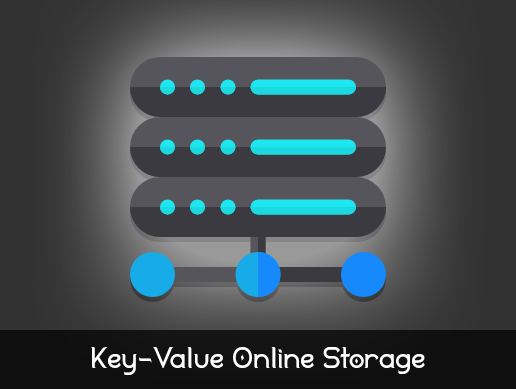
<style>
.page{position:relative;width:516px;height:389px}
.page>*{position:absolute;margin:0}
.t1{font:30px "Duralith";color:#ffffff}
</style>
<div class="page">
<p class="t1" style="left:91px;top:347px;width:334px;height:28px">Key-Value Online Storage</p>
</div>
